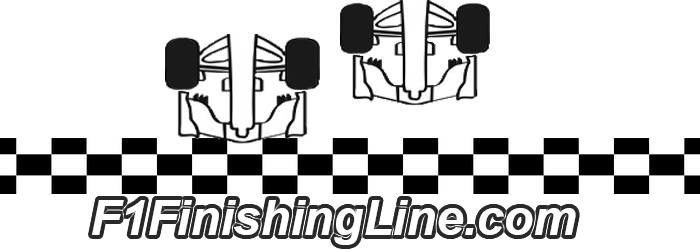
<style>
.page{position:relative;width:700px;height:250px;background:#ffffff}
.page>*{position:absolute;margin:0}
.t1{font:48.6px "Arial-BoldItalicMT";color:#ffffff}
</style>
<div class="page">
<p class="t1" style="left:92px;top:200px;width:484px;height:45px">F1FinishingLine.com</p>
</div>
